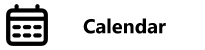
<style>
.page{position:relative;width:205px;height:50px;background:#ffffff}
.page>*{position:absolute;margin:0}
.t1{font:20px "MicrosoftTaiLe-Bold";color:#000000}
</style>
<div class="page">
<p class="t1" style="left:83px;top:18px;width:83px;height:16px">Calendar</p>
</div>
